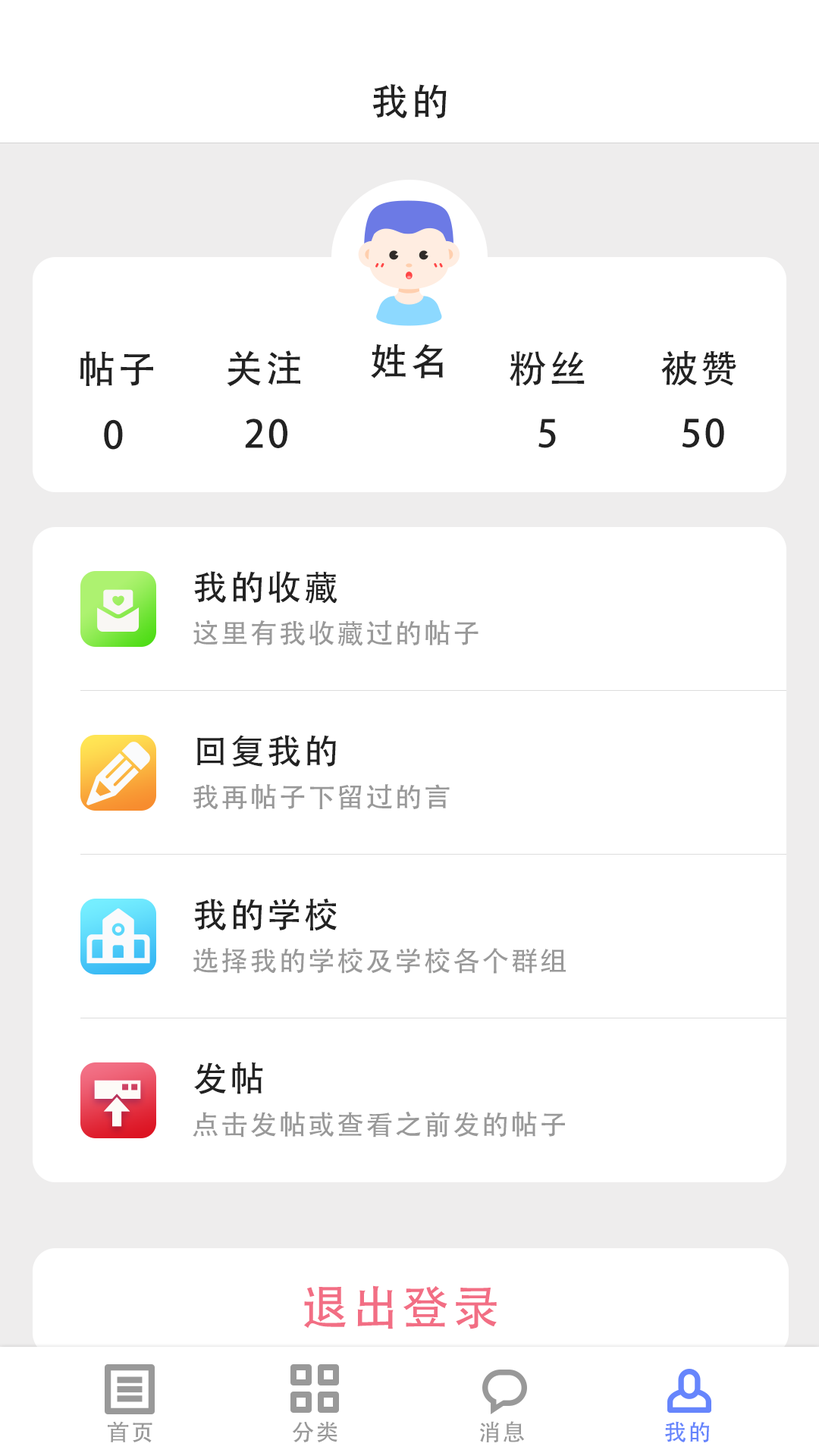
<style>
.page{position:relative;width:819px;height:1456px;background:#ffffff}
.page>*{position:absolute;margin:0}
.t1{font:37.9px "AdobeHeitiStd-Regular";letter-spacing:0.06em;color:#222222}
.t2{font:34.9px "AdobeHeitiStd-Regular";letter-spacing:0.06em;color:#222222}
.t3{font:27.3px "AdobeHeitiStd-Regular";letter-spacing:0.06em;color:#999999}
.t4{font:47.4px "AdobeHeitiStd-Regular";letter-spacing:0.06em;color:#f26e84}
.t5{font:22.7px "AdobeHeitiStd-Regular";letter-spacing:0.06em;color:#999999}
.t6{font:22.7px "AdobeHeitiStd-Regular";letter-spacing:0.06em;color:#6685fc}
</style>
<div class="page">
<p class="t1" style="left:372px;top:83px;width:75px;height:35px">我的</p>
<p class="t1" style="left:80px;top:351px;width:73px;height:35px">帖子</p>
<p class="t1" style="left:227px;top:350px;width:73px;height:37px">关注</p>
<p class="t1" style="left:371px;top:344px;width:72px;height:34px">姓名</p>
<p class="t1" style="left:510px;top:351px;width:75px;height:35px">粉丝</p>
<p class="t1" style="left:661px;top:350px;width:75px;height:36px">被赞</p>
<p class="t1" style="left:104px;top:419px;width:19px;height:31px">0</p>
<p class="t1" style="left:245px;top:419px;width:42px;height:29px">20</p>
<p class="t1" style="left:538px;top:419px;width:18px;height:29px">5</p>
<p class="t1" style="left:682px;top:418px;width:42px;height:30px">50</p>
<p class="t2" style="left:194px;top:571px;width:143px;height:33px">我的收藏</p>
<p class="t3" style="left:193px;top:620px;width:286px;height:26px">这里有我收藏过的帖子</p>
<p class="t2" style="left:197px;top:735px;width:139px;height:32px">回复我的</p>
<p class="t3" style="left:193px;top:783px;width:257px;height:27px">我再帖子下留过的言</p>
<p class="t2" style="left:194px;top:898px;width:143px;height:33px">我的学校</p>
<p class="t3" style="left:193px;top:948px;width:373px;height:26px">选择我的学校及学校各个群组</p>
<p class="t2" style="left:194px;top:1062px;width:69px;height:32px">发帖</p>
<p class="t3" style="left:193px;top:1111px;width:372px;height:26px">点击发帖或查看之前发的帖子</p>
<p class="t4" style="left:304px;top:1285px;width:193px;height:44px">退出登录</p>
<p class="t5" style="left:108px;top:1421px;width:44px;height:22px">首页</p>
<p class="t5" style="left:292px;top:1421px;width:45px;height:21px">分类</p>
<p class="t5" style="left:480px;top:1421px;width:44px;height:21px">消息</p>
<p class="t6" style="left:665px;top:1421px;width:44px;height:21px">我的</p>
</div>
